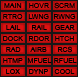
<style>
.page{position:relative;width:78px;height:77px;background:#171717}
.page>*{position:absolute;margin:0}
.t1{font:10px "ArialMT";color:#000000;font-variant:small-caps}
.t2{font:10px "ArialMT";color:#010101;font-variant:small-caps}
</style>
<div class="page">
<p class="t1" style="left:4px;top:3px;width:18px;height:5px">main</p>
<p class="t1" style="left:29px;top:3px;width:21px;height:5px">hovr</p>
<p class="t1" style="left:54px;top:2px;width:21px;height:7px">scrm</p>
<p class="t1" style="left:3px;top:14px;width:20px;height:5px">rtro</p>
<p class="t1" style="left:28px;top:14px;width:21px;height:5px">lwng</p>
<p class="t1" style="left:54px;top:14px;width:22px;height:5px">rwng</p>
<p class="t1" style="left:6px;top:25px;width:15px;height:5px">lail</p>
<p class="t1" style="left:32px;top:25px;width:15px;height:5px">rail</p>
<p class="t1" style="left:55px;top:25px;width:20px;height:5px">gear</p>
<p class="t1" style="left:3px;top:36px;width:20px;height:5px">dock</p>
<p class="t1" style="left:29px;top:36px;width:21px;height:5px">rdor</p>
<p class="t1" style="left:55px;top:36px;width:19px;height:5px">htch</p>
<p class="t1" style="left:6px;top:47px;width:15px;height:5px">rad</p>
<p class="t1" style="left:30px;top:47px;width:17px;height:5px">airb</p>
<p class="t1" style="left:58px;top:46px;width:14px;height:7px">rcs</p>
<p class="t1" style="left:3px;top:58px;width:20px;height:5px">htmp</p>
<p class="t1" style="left:27px;top:58px;width:25px;height:5px">mfuel</p>
<p class="t1" style="left:54px;top:58px;width:23px;height:5px">rfuel</p>
<p class="t1" style="left:6px;top:69px;width:14px;height:5px">lox</p>
<p class="t1" style="left:29px;top:69px;width:19px;height:5px">dynp</p>
<p class="t2" style="left:54px;top:69px;width:21px;height:5px">cool</p>
</div>
